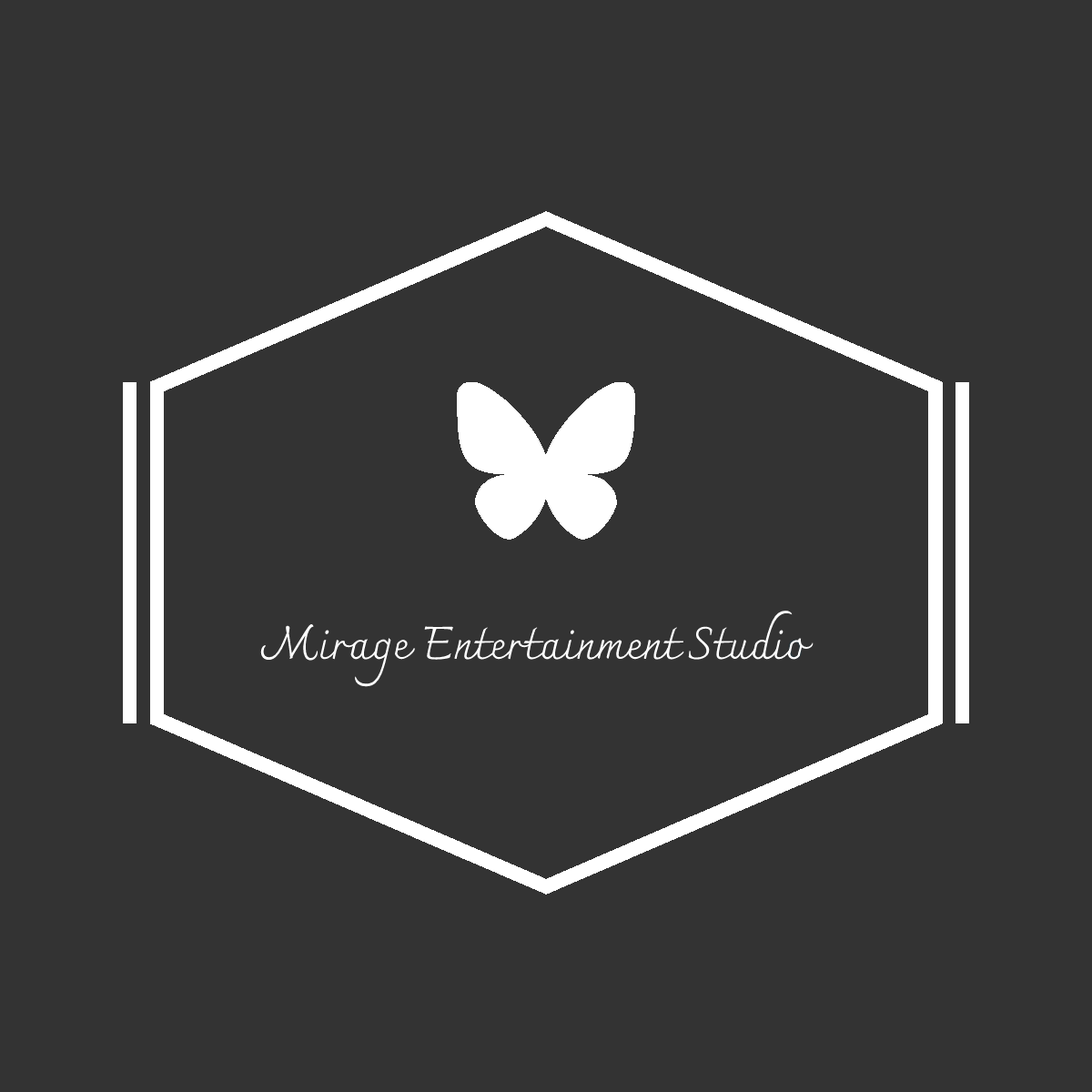
<style>
.page{position:relative;width:1092px;height:1092px;background:#333333}
.page>*{position:absolute;margin:0}
.t1{font:45.5px "Charmonman-Regular";color:#ffffff}
</style>
<div class="page">
<p class="t1" style="left:260px;top:611px;width:554px;height:76px">Mirage Entertainment Studio</p>
</div>
